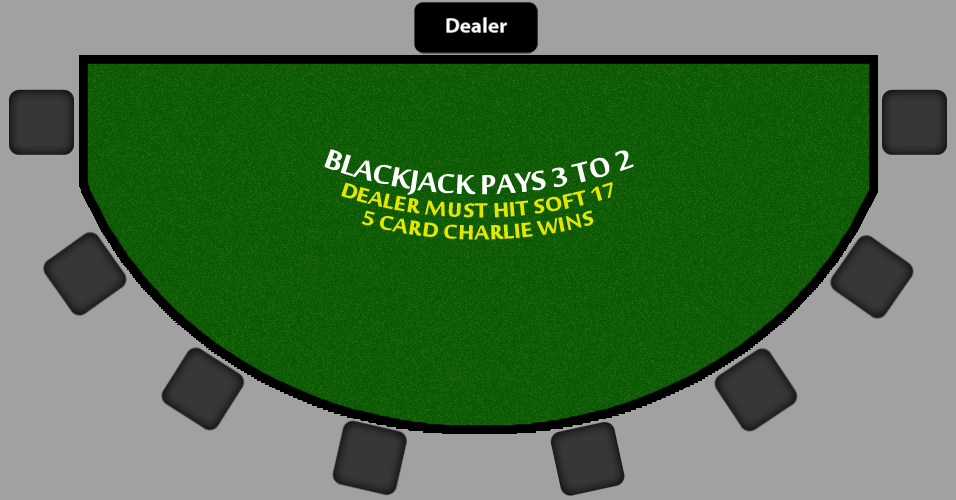
<style>
.page{position:relative;width:956px;height:500px;background:#a1a1a1}
.page>*{position:absolute;margin:0}
.t1{font:41.7px "MoolBoran";color:#ffffff}
.t2{font:31.2px "MoolBoran";color:#e3e600}
</style>
<div class="page">
<p class="t1" style="left:324px;top:149px;width:310px;height:46px">BLACKJACK PAYS 3 TO 2</p>
<p class="t2" style="left:341px;top:182px;width:272px;height:36px">DEALER MUST HIT SOFT 17</p>
<p class="t2" style="left:361px;top:210px;width:233px;height:30px">5 CARD CHARLIE WINS</p>
</div>
